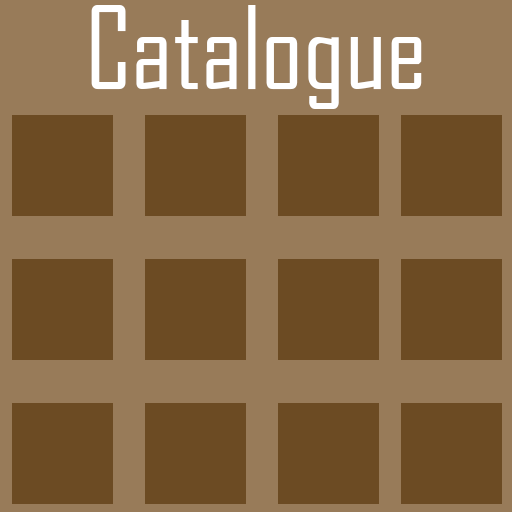
<style>
.page{position:relative;width:512px;height:512px;background:#6c4b23}
.page>*{position:absolute;margin:0}
.t1{font:110px "AgencyFB-Reg";color:#ffffff}
</style>
<div class="page">
<p class="t1" style="left:91px;top:5px;width:331px;height:104px">Catalogue</p>
</div>
